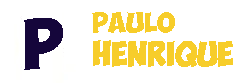
<style>
.page{position:relative;width:238px;height:83px;background:#ffffff}
.page>*{position:absolute;margin:0}
.t1{font:20px "ObelixPro-Bold";color:#f7cd2a}
.t2{font:50px "ObelixPro-Bold";color:#15063b}
.t3{font:25px "ObelixPro-Bold";color:#f7cd2a;scale:0.9 1}
</style>
<div class="page">
<p class="t1" style="left:92px;top:12px;width:83px;height:21px">Paulo</p>
<p class="t2" style="left:24px;top:18px;width:39px;height:52px">P</p>
<p class="t3" style="left:93px;top:40px;width:140px;height:27px">Henrique</p>
</div>
